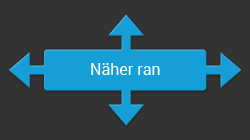
<style>
.page{position:relative;width:250px;height:140px;background:#333333}
.page>*{position:absolute;margin:0}
.t1{font:16px "Roboto-Regular";color:#ffffff}
</style>
<div class="page">
<p class="t1" style="left:91px;top:63px;width:69px;height:12px">Näher ran</p>
</div>
